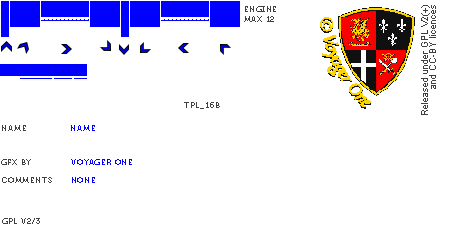
<style>
.page{position:relative;width:450px;height:230px;background:#ffffff}
.page>*{position:absolute;margin:0}
.t1{font:8px "Museo700-Regular";letter-spacing:0.075em;color:#404040;text-transform:uppercase}
.t2{font:8px "Museo700-Regular";letter-spacing:0.075em;color:#0000ff;text-transform:uppercase}
</style>
<div class="page">
<p class="t1" style="left:244px;top:6px;width:32px;height:16px">engine<br>max 12</p>
<p class="t1" style="left:184px;top:102px;width:36px;height:7px">tpl_16b</p>
<p class="t1" style="left:2px;top:125px;width:24px;height:6px">name</p>
<p class="t2" style="left:71px;top:125px;width:24px;height:6px">name</p>
<p class="t1" style="left:1px;top:159px;width:30px;height:6px">gfx by</p>
<p class="t2" style="left:71px;top:159px;width:61px;height:6px">voyager one</p>
<p class="t1" style="left:2px;top:177px;width:50px;height:6px">comments</p>
<p class="t2" style="left:72px;top:177px;width:23px;height:6px">none</p>
<p class="t1" style="left:2px;top:218px;width:38px;height:6px">gpl v2/3</p>
</div>
